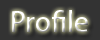
<style>
.page{position:relative;width:100px;height:40px;background:#333333}
.page>*{position:absolute;margin:0}
.t1{font:30px "MyriadPro-Regular";color:#ffffff}
</style>
<div class="page">
<p class="t1" style="left:12px;top:10px;width:76px;height:22px">Profile</p>
</div>
